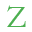
<style>
.page{position:relative;width:32px;height:32px;background:#ffffff}
.page>*{position:absolute;margin:0}
.t1{font:32px "STKaiti";color:#4caf50}
</style>
<div class="page">
<p class="t1" style="left:7px;top:5px;width:19px;height:22px">Z</p>
</div>
